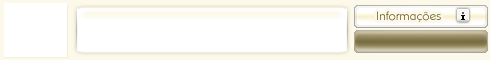
<style>
.page{position:relative;width:490px;height:60px;background:#ffffff}
.page>*{position:absolute;margin:0}
.t1{font:12px "SharnayExtralight"}
</style>
<div class="page">
<p class="t1" style="left:377px;top:11px;width:64px;height:11px">Informações</p>
</div>
